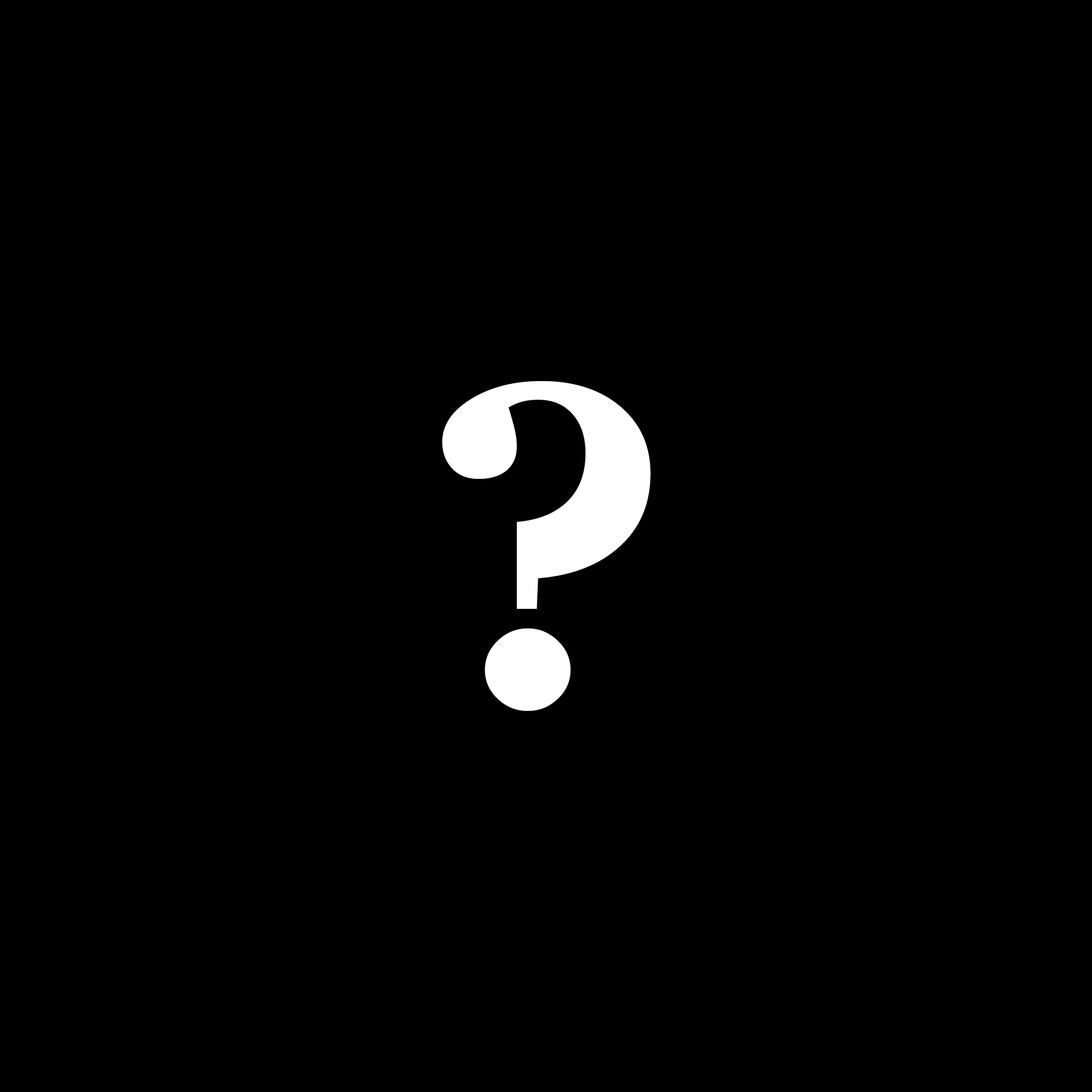
<style>
.page{position:relative;width:1092px;height:1092px;background:#000000}
.page>*{position:absolute;margin:0}
.t1{font:455px "Georgia-Bold";color:#ffffff}
</style>
<div class="page">
<p class="t1" style="left:442px;top:381px;width:209px;height:330px">?</p>
</div>
